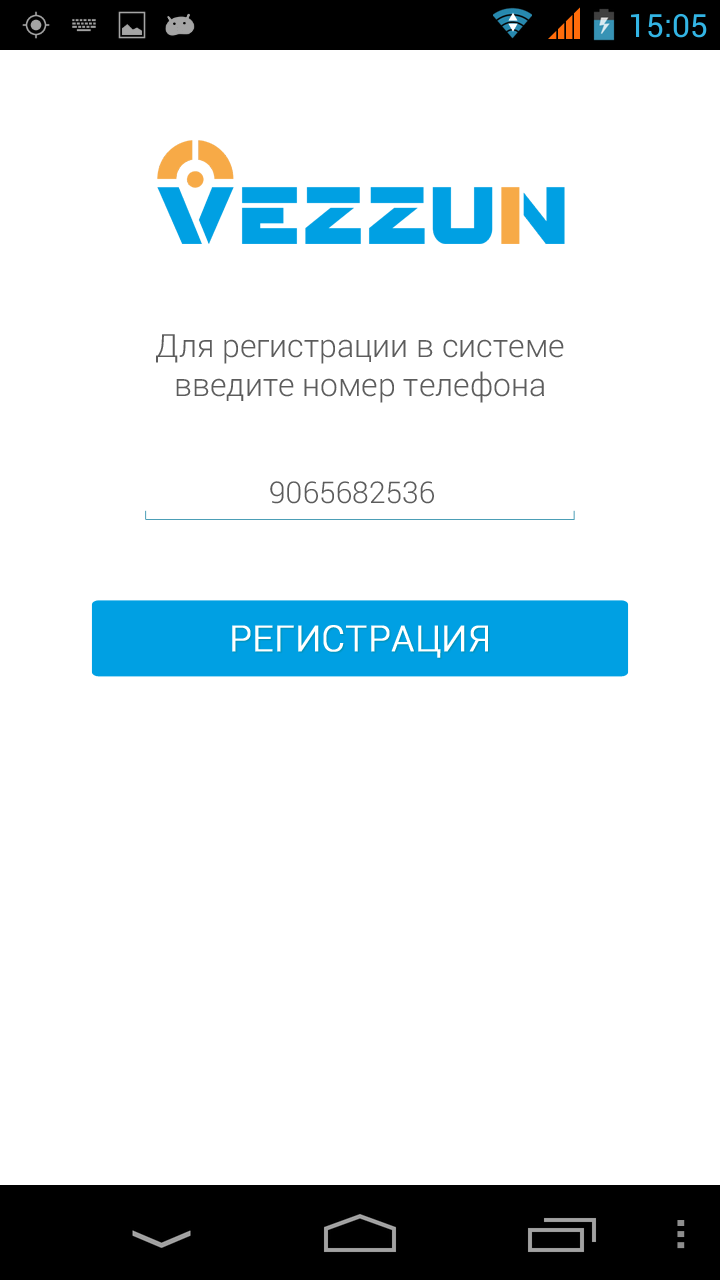
<style>
.page{position:relative;width:720px;height:1280px;background:#ffffff}
.page>*{position:absolute;margin:0}
.t1{font:32px "Roboto-Light";color:#5c5c5c}
.t2{font:30px "Roboto-Light";color:#5c5c5c}
.t3{font:36px "Roboto-Light";color:#ffffff;text-transform:uppercase;font-weight:bold}
</style>
<div class="page">
<p class="t1" style="left:156px;top:334px;width:408px;height:69px;text-align:center">Для регистрации в системе введите номер телефона</p>
<p class="t2" style="left:270px;top:481px;width:164px;height:23px">9065682536</p>
<p class="t3" style="left:232px;top:625px;width:256px;height:33px">Регистрация</p>
</div>
